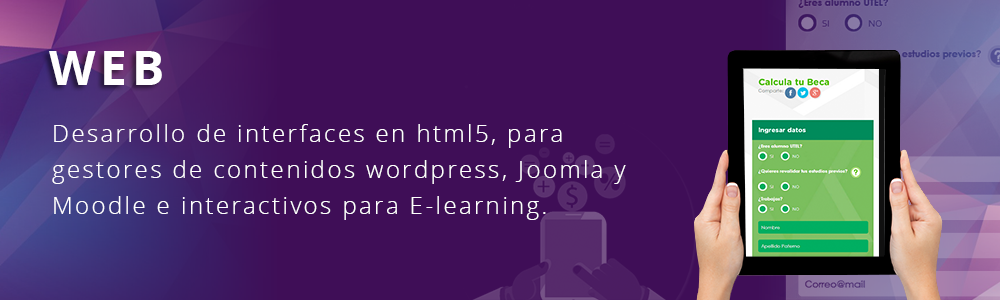
<style>
.page{position:relative;width:1000px;height:300px;background:#3f0e57}
.page>*{position:absolute;margin:0}
.t1{font:48px "OpenSans-Bold";letter-spacing:0.1em;color:#ffffff}
.t2{font:24px/36px "OpenSans-Light";letter-spacing:0.1em;color:#ffffff}
</style>
<div class="page">
<p class="t1" style="left:49px;top:51px;width:113px;height:34px">WEB</p>
<p class="t2" style="left:52px;top:124px;width:574px;height:96px">Desarrollo de interfaces en html5, para gestores de contenidos wordpress, Joomla y Moodle e interactivos para E-learning.</p>
</div>
